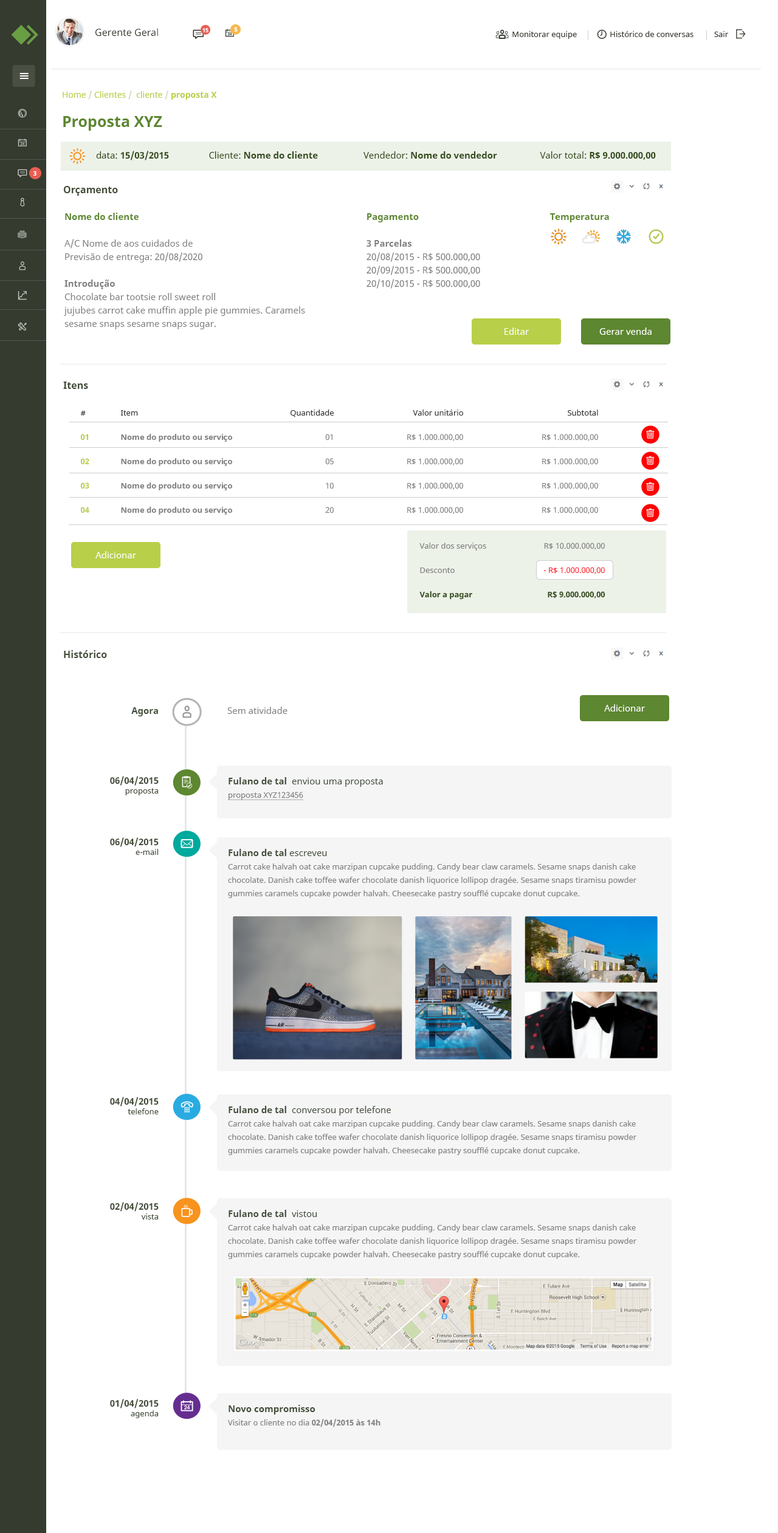
<style>
.page{position:relative;width:778px;height:1533px;background:#ffffff}
.page>*{position:absolute;margin:0}
.t1{font:9.7px "NotoSans";color:#353b2f}
.t2{font:5.5px "NotoSans-Bold";color:#ffffff}
.t3{font:6.1px "NotoSans-Bold";color:#ffffff}
.t4{font:7.9px "NotoSans";color:#353b2f}
.t5{font:8.5px "NotoSans-Bold";color:#b8cf49}
.t6{font:8.5px "NotoSans";color:#b8cf49}
.t7{font:8.5px "NotoSans";color:#c7cfa1}
.t8{font:15.2px "NotoSans-Bold";color:#5d8730}
.t9{font:9.1px "NotoSans-Bold";color:#324a1a}
.t10{font:9.1px "NotoSans";color:#324a1a}
.t11{font:9.7px "NotoSans-Bold";color:#424d38}
.t12{font:9.1px/13.4px "NotoSans";color:#808080}
.t13{font:9.1px/13.4px "NotoSans-Bold";color:#5d8730}
.t14{font:9.1px/13.4px "NotoSans-Bold";color:#808080}
.t15{font:9.1px "NotoSans-Bold";color:#5d8730}
.t16{font:9.1px "NotoSans";color:#ffffff}
.t17{font:7.9px/24.3px "NotoSans-Bold";color:#b8cf49}
.t18{font:7.9px/24.3px "NotoSans";color:#333333}
.t19{font:7.9px/24.3px "NotoSans-Bold";color:#808080}
.t20{font:7.9px/24.3px "NotoSans";color:#808080}
.t21{font:7.9px/24.3px "NotoSans-Bold";color:#324a1a}
.t22{font:7.9px/24.3px "NotoSans";color:#ff1d25}
.t23{font:9.1px "NotoSans-Bold";color:#424d38}
.t24{font:9.1px "NotoSans";color:#808080}
.t25{font:7.9px "NotoSans";color:#424d38}
.t26{font:9.1px/13.4px "NotoSans";color:#424d38}
.t27{font:9.1px/13.4px "NotoSans-Bold";color:#424d38}
.t28{font:7.9px/13.4px "NotoSans";color:#808080;text-decoration:underline}
.t29{font:7.9px/13.4px "NotoSans";color:#808080}
.t30{font:7.9px/13.4px "NotoSans-Bold";color:#808080}
</style>
<div class="page">
<p class="t1" style="left:95px;top:28px;width:63px;height:8px">Gerente Geral</p>
<p class="t2" style="left:202px;top:28px;width:6px;height:5px">15</p>
<p class="t3" style="left:234px;top:27px;width:4px;height:5px">5</p>
<p class="t4" style="left:512px;top:31px;width:216px;height:8px">Monitorar equipe                Histórico de conversas          Sair</p>
<p class="t5" style="left:63px;top:91px;width:154px;height:9px"><span class="t6">Home </span><span class="t7">/</span><span class="t6"> Clientes </span><span class="t7">/  </span><span class="t6">cliente </span><span class="t7">/ </span>proposta X</p>
<p class="t8" style="left:63px;top:116px;width:99px;height:15px">Proposta XYZ</p>
<p class="t9" style="left:96px;top:151px;width:73px;height:9px"><span class="t10">data: </span>15/03/2015</p>
<p class="t9" style="left:209px;top:151px;width:109px;height:8px"><span class="t10">Cliente: </span>Nome do cliente</p>
<p class="t9" style="left:363px;top:151px;width:134px;height:8px"><span class="t10">Vendedor: </span>Nome do vendedor</p>
<p class="t9" style="left:540px;top:151px;width:116px;height:9px"><span class="t10">Valor total: </span>R$ 9.000.000,00</p>
<p class="t3" style="left:33px;top:171px;width:3px;height:5px">3</p>
<p class="t11" style="left:64px;top:186px;width:54px;height:10px">Orçamento</p>
<p class="t12" style="left:64px;top:213px;width:241px;height:116px"><span class="t13">Nome do cliente<br></span><br>A/C Nome de aos cuidados de<br>Previsão de entrega: 20/08/2020<br><span class="t14"><br>Introdução<br></span>Chocolate bar tootsie roll sweet roll<br>jujubes carrot cake muffin apple pie gummies. Caramels sesame snaps sesame snaps sugar.</p>
<p class="t12" style="left:366px;top:213px;width:114px;height:76px"><span class="t13">Pagamento<br><br></span><span class="t14">3 Parcelas<br></span>20/08/2015 - R$ 500.000,00<br>20/09/2015 - R$ 500.000,00<br>20/10/2015 - R$ 500.000,00</p>
<p class="t15" style="left:550px;top:213px;width:59px;height:9px">Temperatura</p>
<p class="t16" style="left:504px;top:328px;width:25px;height:7px">Editar</p>
<p class="t16" style="left:599px;top:328px;width:52px;height:7px">Gerar venda</p>
<p class="t11" style="left:63px;top:382px;width:25px;height:7px">Itens</p>
<p class="t17" style="left:80px;top:410px;width:9px;height:103px"><span class="t18">#<br></span>01<br>02<br>03<br>04</p>
<p class="t19" style="left:120px;top:410px;width:113px;height:105px"><span class="t18">Item<br></span>Nome do produto ou serviço<br>Nome do produto ou serviço<br>Nome do produto ou serviço<br>Nome do produto ou serviço</p>
<p class="t20" style="left:290px;top:410px;width:44px;height:103px;text-align:right"><span class="t18">Quantidade<br></span>01<br>05<br>10<br>20</p>
<p class="t20" style="left:407px;top:410px;width:56px;height:104px;text-align:right"><span class="t18">Valor unitário<br></span>R$ 1.000.000,00<br>R$ 1.000.000,00<br>R$ 1.000.000,00<br>R$ 1.000.000,00</p>
<p class="t20" style="left:542px;top:410px;width:56px;height:104px;text-align:right"><span class="t18">Subtotal <br></span>R$ 1.000.000,00<br>R$ 1.000.000,00<br>R$ 1.000.000,00<br>R$ 1.000.000,00</p>
<p class="t20" style="left:419px;top:543px;width:67px;height:56px">Valor dos serviços<br>Desconto<br><span class="t21">Valor a pagar</span></p>
<p class="t22" style="left:543px;top:543px;width:62px;height:56px;text-align:right"><span class="t20">R$ 10.000.000,00<br></span>- R$ 1.000.000,00<br><span class="t21">R$ 9.000.000,00</span></p>
<p class="t16" style="left:95px;top:551px;width:41px;height:7px">Adicionar</p>
<p class="t11" style="left:64px;top:650px;width:43px;height:8px">Histórico</p>
<p class="t23" style="left:131px;top:707px;width:27px;height:9px">Agora</p>
<p class="t24" style="left:227px;top:707px;width:60px;height:7px">Sem atividade</p>
<p class="t16" style="left:604px;top:704px;width:41px;height:8px">Adicionar</p>
<p class="t23" style="left:110px;top:776px;width:49px;height:19px;text-align:right">06/04/2015<br><span class="t25">proposta</span></p>
<p class="t26" style="left:227px;top:777px;width:156px;height:23px"><span class="t27">Fulano de tal </span> enviou uma proposta<br><span class="t28">proposta XYZ123456</span></p>
<p class="t23" style="left:110px;top:837px;width:49px;height:18px;text-align:right">06/04/2015<br><span class="t25">e-mail</span></p>
<p class="t29" style="left:228px;top:849px;width:408px;height:49px"><span class="t27">Fulano de tal </span><span class="t26">escreveu<br></span>Carrot cake halvah oat cake marzipan cupcake pudding. Candy bear claw caramels. Sesame snaps danish cake chocolate. Danish cake toffee wafer chocolate danish liquorice lollipop dragée. Sesame snaps tiramisu powder gummies caramels cupcake powder halvah. Cheesecake pastry soufflé cupcake donut cupcake.</p>
<p class="t23" style="left:110px;top:1097px;width:49px;height:17px;text-align:right">04/04/2015<br><span class="t25">telefone</span></p>
<p class="t29" style="left:228px;top:1106px;width:408px;height:49px"><span class="t27">Fulano de tal </span><span class="t26"> conversou por telefone<br></span>Carrot cake halvah oat cake marzipan cupcake pudding. Candy bear claw caramels. Sesame snaps danish cake chocolate. Danish cake toffee wafer chocolate danish liquorice lollipop dragée. Sesame snaps tiramisu powder gummies caramels cupcake powder halvah. Cheesecake pastry soufflé cupcake donut cupcake.</p>
<p class="t23" style="left:110px;top:1202px;width:49px;height:18px;text-align:right">02/04/2015<br><span class="t25">vista</span></p>
<p class="t29" style="left:228px;top:1210px;width:408px;height:49px"><span class="t27">Fulano de tal </span><span class="t26"> vistou<br></span>Carrot cake halvah oat cake marzipan cupcake pudding. Candy bear claw caramels. Sesame snaps danish cake chocolate. Danish cake toffee wafer chocolate danish liquorice lollipop dragée. Sesame snaps tiramisu powder gummies caramels cupcake powder halvah. Cheesecake pastry soufflé cupcake donut cupcake.</p>
<p class="t23" style="left:110px;top:1399px;width:49px;height:19px;text-align:right">01/04/2015<br><span class="t25">agenda</span></p>
<p class="t29" style="left:228px;top:1405px;width:152px;height:22px"><span class="t27">Novo compromisso<br></span>Visitar o cliente no dia <span class="t30">02/04/2015 às 14h</span></p>
</div>
